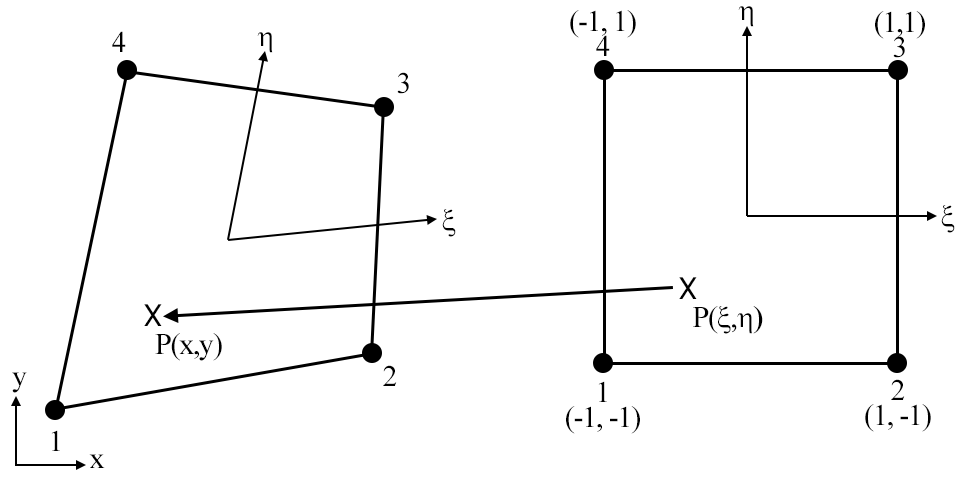
<style>
.page{position:relative;width:964px;height:481px;background:#ffffff}
.page>*{position:absolute;margin:0}
.t1{font:30px/25px "TimesNewRomanPSMT";letter-spacing:-0.04em;color:#000000}
.t2{font:30px "TimesNewRomanPSMT";letter-spacing:-0.04em;color:#000000}
.t3{font:30px "Tahoma";letter-spacing:-0.04em;color:#000000}
</style>
<div class="page">
<p class="t1" style="left:570px;top:10px;width:66px;height:46px;text-align:center">(-1, 1)<br>4</p>
<p class="t1" style="left:875px;top:11px;width:50px;height:47px;text-align:center">(1,1)<br>3</p>
<p class="t2" style="left:112px;top:31px;width:14px;height:21px">4</p>
<p class="t2" style="left:397px;top:72px;width:12px;height:22px">3</p>
<p class="t3" style="left:679px;top:277px;width:18px;height:22px">X</p>
<p class="t3" style="left:144px;top:304px;width:18px;height:22px">X</p>
<p class="t2" style="left:155px;top:333px;width:67px;height:28px">P(x,y)</p>
<p class="t2" style="left:383px;top:365px;width:14px;height:21px">2</p>
<p class="t2" style="left:12px;top:372px;width:15px;height:21px">y</p>
<p class="t1" style="left:566px;top:381px;width:74px;height:53px;text-align:center">1<br>(-1, -1)</p>
<p class="t1" style="left:865px;top:379px;width:66px;height:53px;text-align:center">2<br>(1, -1)</p>
<p class="t2" style="left:51px;top:430px;width:9px;height:21px">1</p>
<p class="t2" style="left:89px;top:454px;width:16px;height:14px">x</p>
</div>
